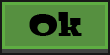
<style>
.page{position:relative;width:110px;height:55px;background:#569040}
.page>*{position:absolute;margin:0}
.t1{font:33px "Bigfish-Black";color:#000000}
</style>
<div class="page">
<p class="t1" style="left:29px;top:12px;width:53px;height:24px">Ok</p>
</div>
